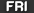
<style>
.page{position:relative;width:34px;height:13px}
.page>*{position:absolute;margin:0}
.t1{font:13.9px "K2D-ExtraBold";color:#ffffff}
</style>
<div class="page">
<p class="t1" style="left:6px;top:1px;width:21px;height:11px">FRI</p>
</div>
